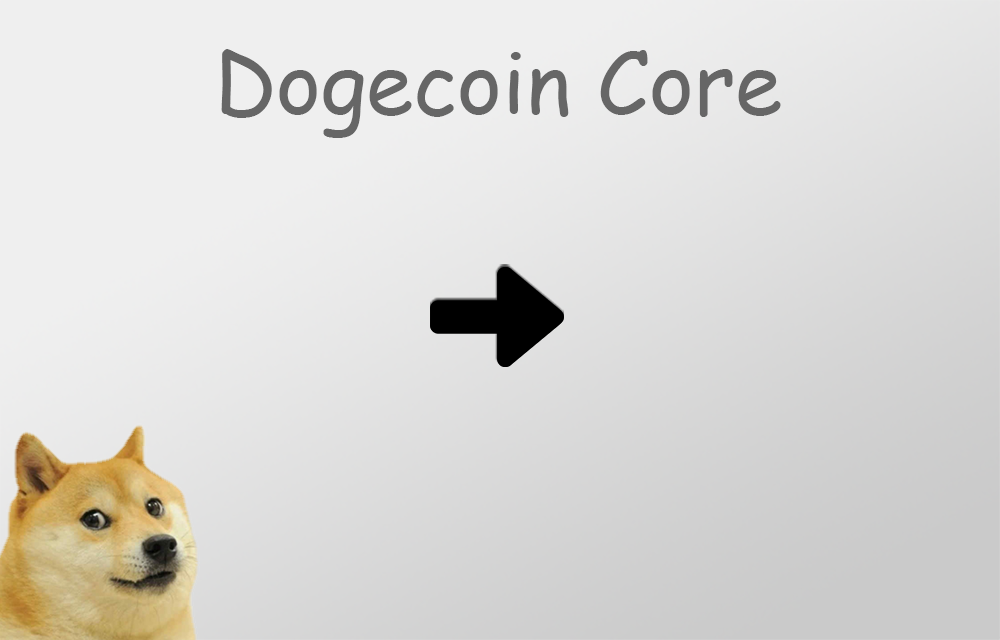
<style>
.page{position:relative;width:1000px;height:640px}
.page>*{position:absolute;margin:0}
.t1{font:85.7px "ComicSansMS";color:#666666}
</style>
<div class="page">
<p class="t1" style="left:221px;top:49px;width:560px;height:89px">Dogecoin Core</p>
</div>
